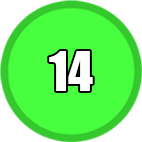
<style>
.page{position:relative;width:142px;height:142px;background:#47ff3e}
.page>*{position:absolute;margin:0}
.t1{font:50px "Impact";color:#ffffff}
</style>
<div class="page">
<p class="t1" style="left:49px;top:51px;width:44px;height:40px">14</p>
</div>
